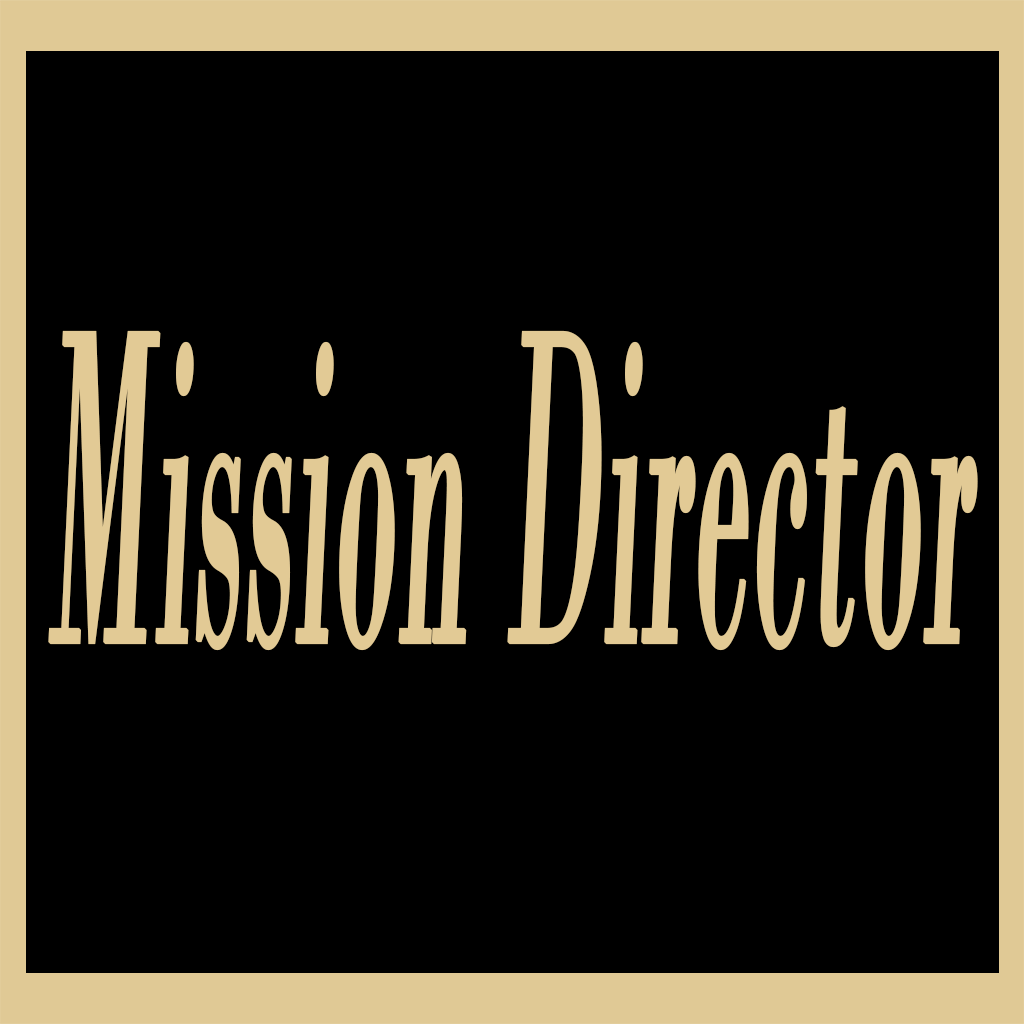
<style>
.page{position:relative;width:1024px;height:1024px;background:#000000}
.page>*{position:absolute;margin:0}
.t1{font:472.5px "BodoniMT";letter-spacing:0.005em;color:#e2ca95;font-weight:bold;font-style:italic;scale:0.26 1}
</style>
<div class="page">
<p class="t1" style="left:48px;top:330px;width:930px;height:321px">Mission Director</p>
</div>
